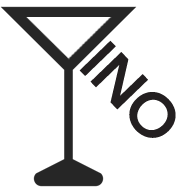
<style>
.page{position:relative;width:192px;height:192px;background:#ffffff}
.page>*{position:absolute;margin:0}
.t1{font:60px "Avenir-Heavy";letter-spacing:-0.02em;color:#231f20}
</style>
<div class="page">
<p class="t1" style="left:79px;top:40px;width:97px;height:98px;rotate:46deg">INO</p>
</div>
